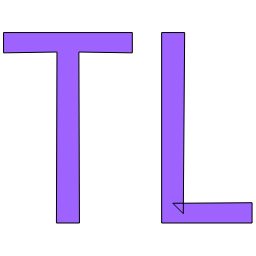
<style>
.page{position:relative;width:256px;height:256px;background:#ffffff}
.page>*{position:absolute;margin:0}
.t1{font:274px "Ruda-Regular";color:#9e63ff}
</style>
<div class="page">
<p class="t1" style="left:2px;top:31px;width:252px;height:193px">TL</p>
</div>
